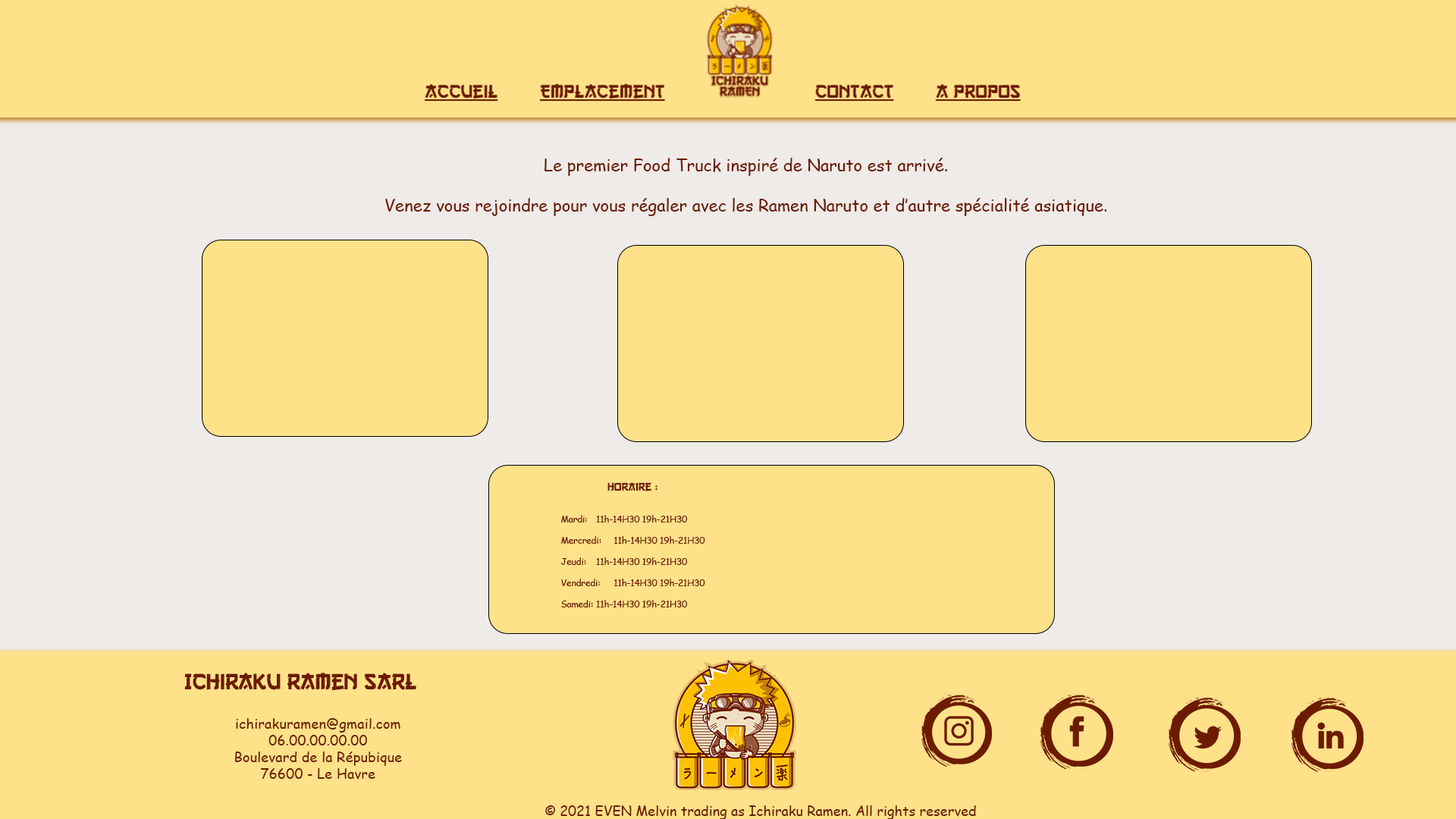
<style>
.page{position:relative;width:1456px;height:819px;background:#fee189}
.page>*{position:absolute;margin:0}
.t1{font:16.7px "ComicSansMS";color:#6d1b00}
.t2{font:8.8px "ComicSansMS";color:#6d1b00}
.t3{font:11.7px "GangofThree";color:#6d1b00}
.t4{font:13.9px "ComicSansMS";color:#6d1b00}
.t5{font:23.2px "GangofThree";color:#6d1b00}
.t6{font:13.6px "ComicSansMS";color:#6d1b00}
</style>
<div class="page">
<p class="t1" style="left:385px;top:158px;width:722px;height:58px;text-align:center">Le premier Food Truck inspiré de Naruto est arrivé.<br><br>Venez vous rejoindre pour vous régaler avec les Ramen Naruto et d’autre spécialité asiatique.</p>
<p class="t2" style="left:560px;top:482px;width:145px;height:125px;text-align:center"><span class="t3">Horaire :<br><br></span>  Mardi:  11h-14H30 19h-21H30<br>  <br>  Mercredi:  11h-14H30 19h-21H30<br>  <br>  Jeudi:  11h-14H30 19h-21H30<br>  <br>  Vendredi:  11h-14H30 19h-21H30<br>  <br>  Samedi: 11h-14H30 19h-21H30</p>
<p class="t4" style="left:184px;top:673px;width:232px;height:107px"><span class="t5">Ichiraku Ramen SARL<br><br></span>ichirakuramen@gmail.com<br>06.00.00.00.00<br>Boulevard de la Répubique<br>76600 - Le Havre<br><br>76600 - Le Havre</p>
<p class="t6" style="left:545px;top:805px;width:431px;height:15px">© 2021 EVEN Melvin trading as Ichiraku Ramen. All rights reserved</p>
</div>
